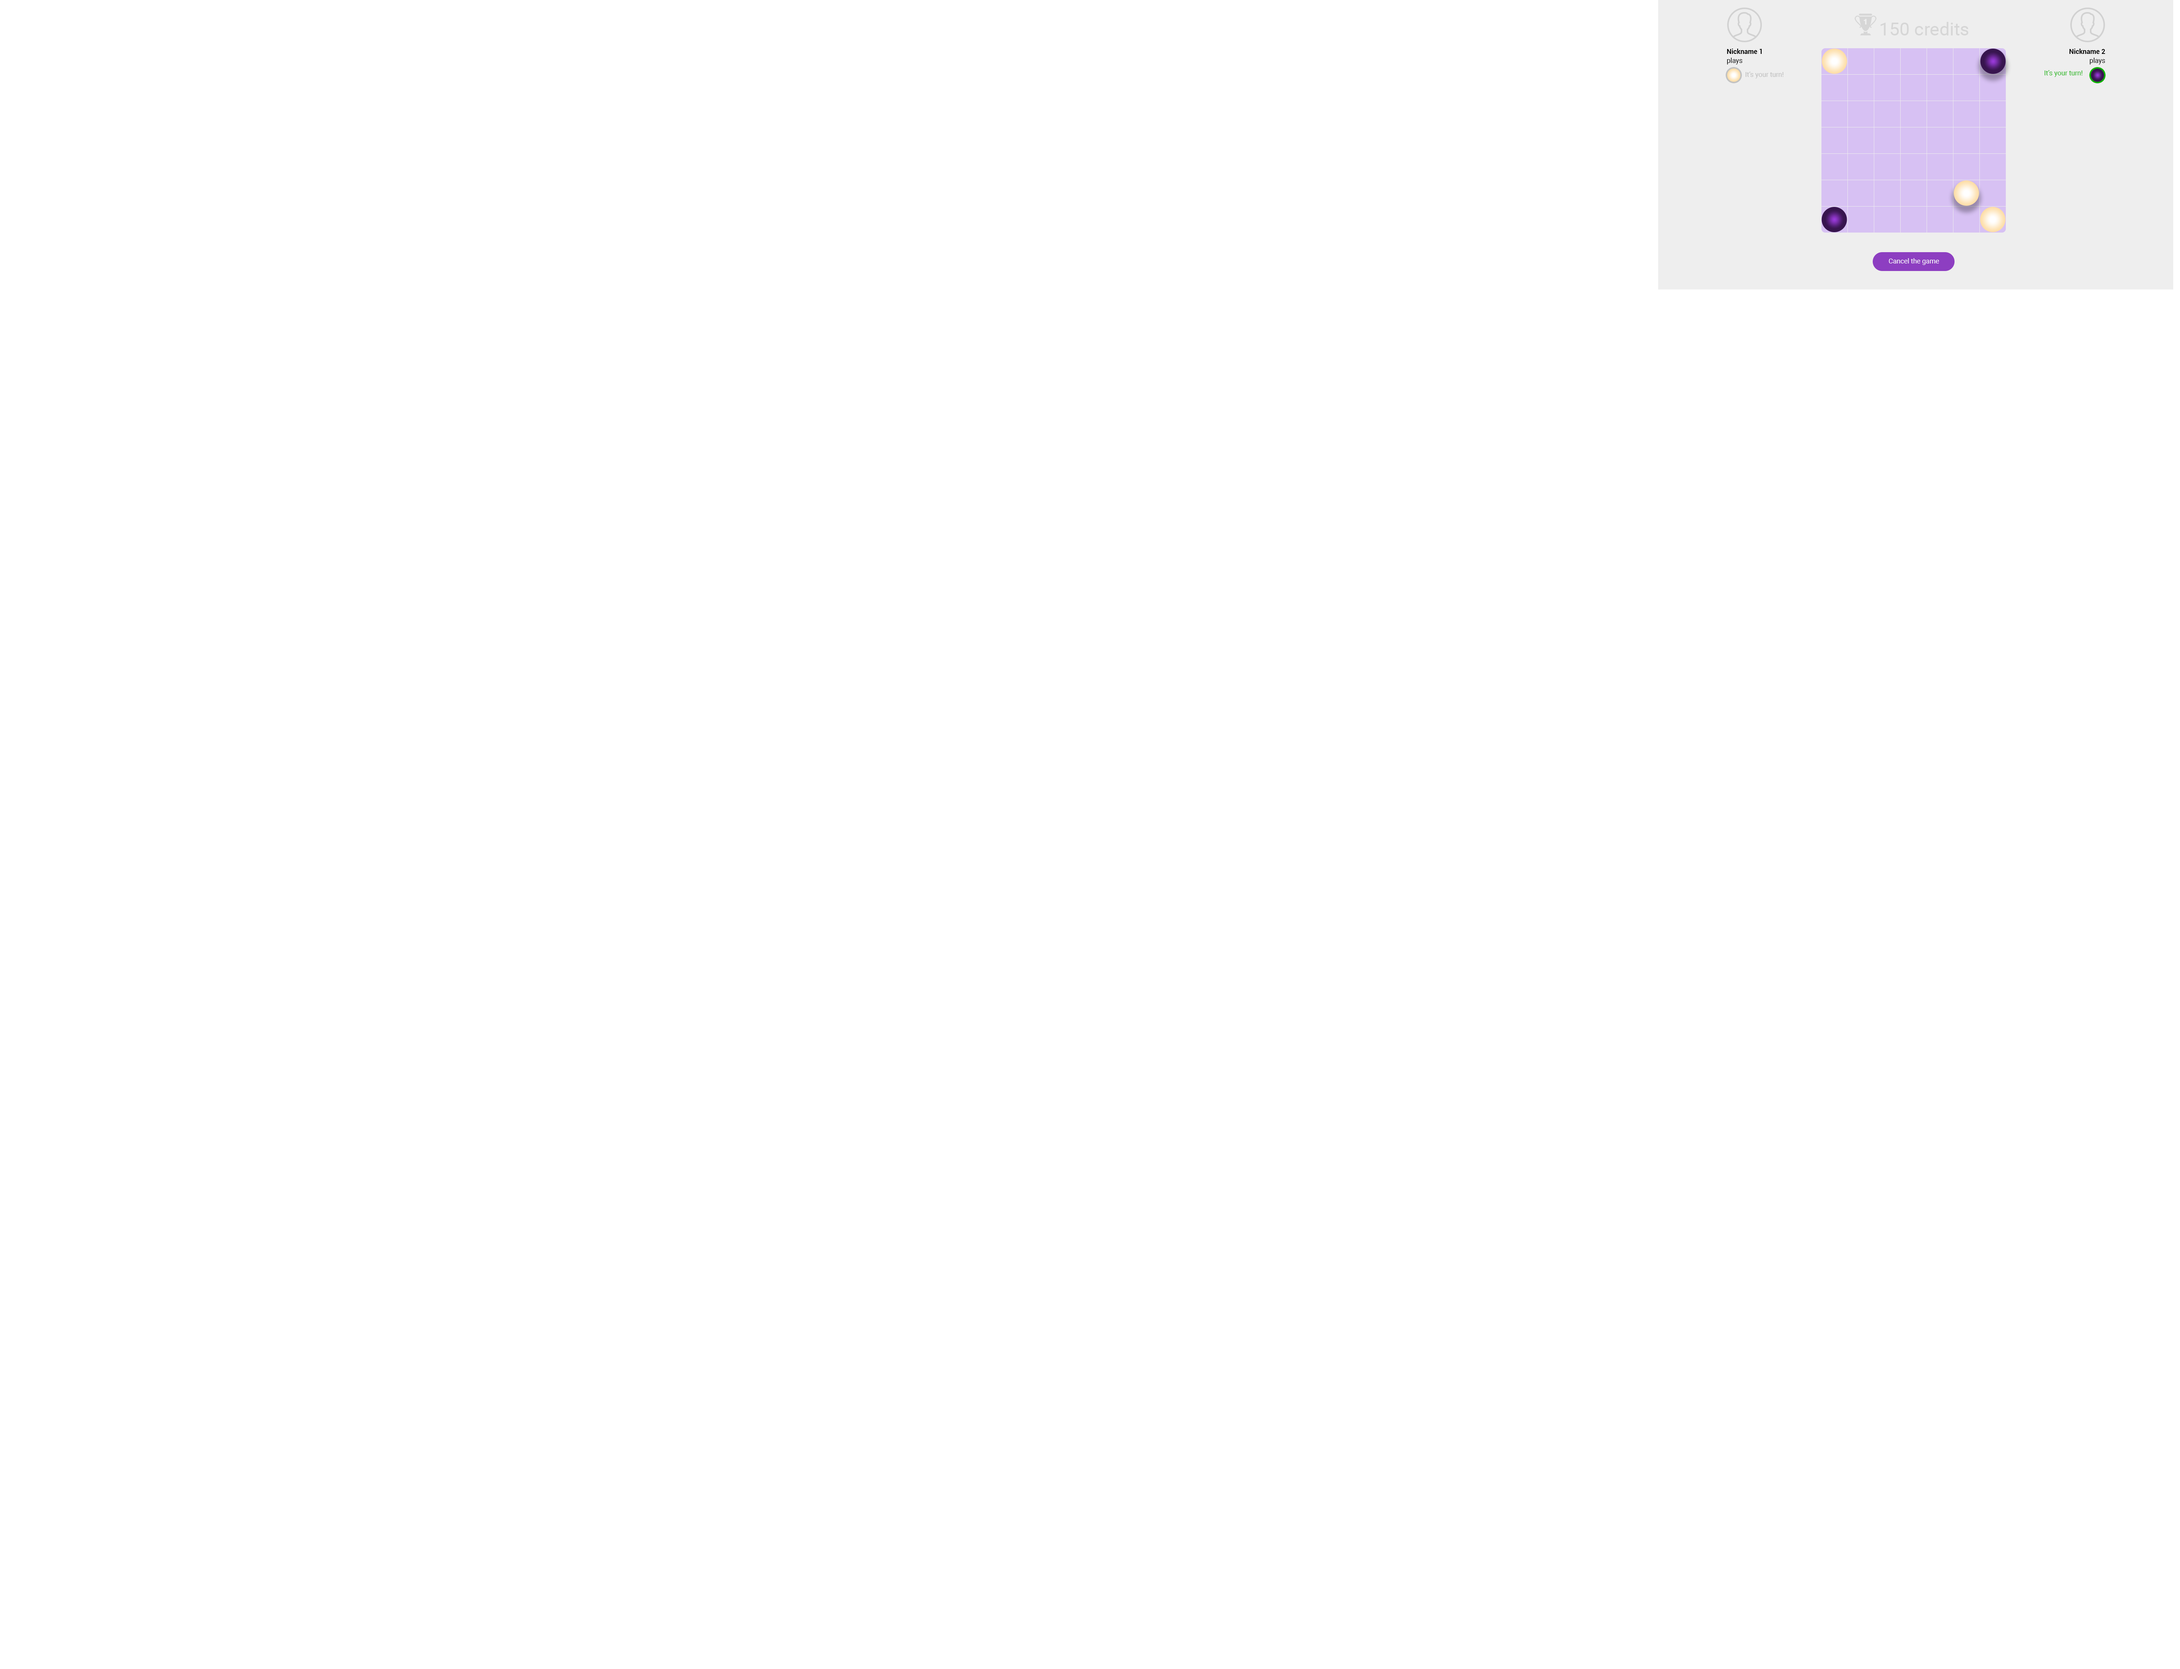
<style>
.page{position:relative;width:2180px;height:1669px;background:#ffffff}
.page>*{position:absolute;margin:0}
.t1{font:18.2px "Roboto-Regular";color:#d6d6d6}
.t2{font:6.8px/9px "Roboto-Bold";color:#000000}
.t3{font:6.8px/9px "Roboto-Regular";color:#000000}
.t4{font:6.8px "Roboto-Regular";color:#bdbdbd}
.t5{font:6.8px "Roboto-Regular";color:#24b61a}
.t6{font:6.8px "Roboto-Regular";color:#ffffff}
</style>
<div class="page">
<p class="t1" style="left:1880px;top:22px;width:88px;height:13px">150 credits</p>
<p class="t2" style="left:1726px;top:49px;width:36px;height:15px">Nickname 1<br><span class="t3">plays</span></p>
<p class="t2" style="left:2069px;top:49px;width:36px;height:15px;text-align:right">Nickname 2<br><span class="t3">plays</span></p>
<p class="t4" style="left:1745px;top:72px;width:38px;height:6px">It’s your turn!</p>
<p class="t5" style="left:2044px;top:70px;width:38px;height:7px">It’s your turn!</p>
<p class="t6" style="left:1888px;top:258px;width:51px;height:7px">Cancel the game</p>
</div>
